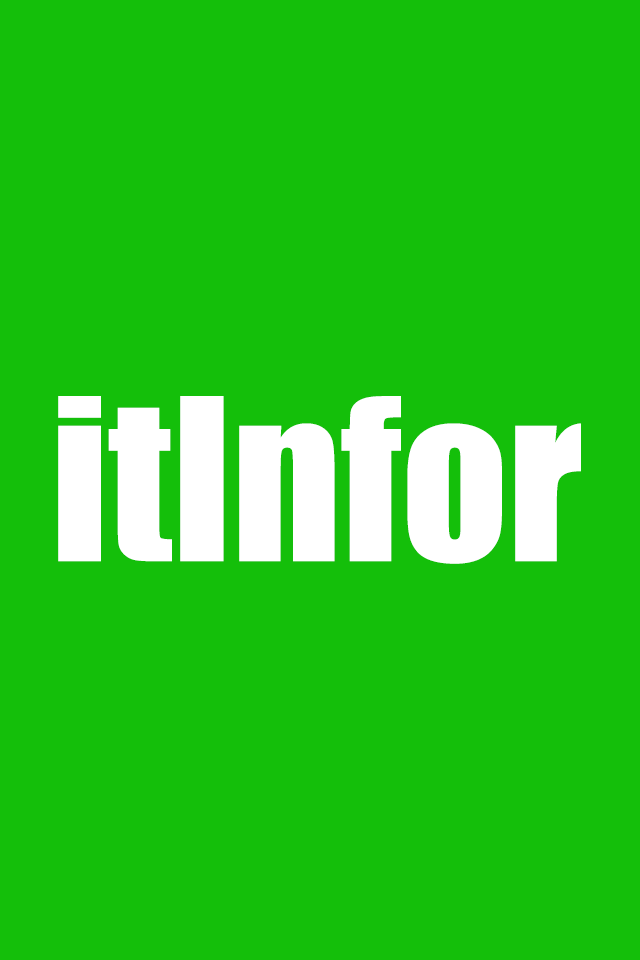
<style>
.page{position:relative;width:640px;height:960px;background:#14bf0a}
.page>*{position:absolute;margin:0}
.t1{font:208.7px "Impact";color:#ffffff}
</style>
<div class="page">
<p class="t1" style="left:58px;top:396px;width:523px;height:168px">itInfor</p>
</div>
